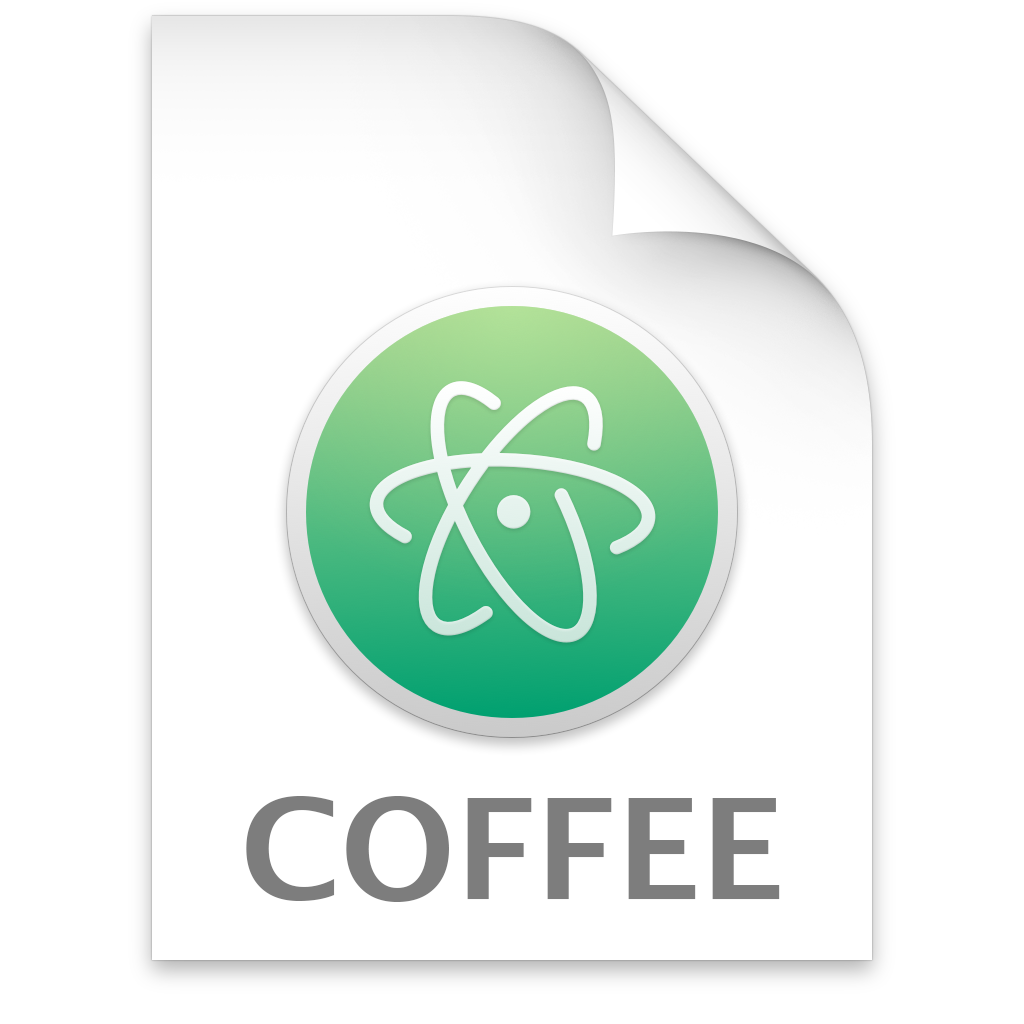
<style>
.page{position:relative;width:1024px;height:1024px;background:#ffffff}
.page>*{position:absolute;margin:0}
.t1{font:140px "LucidaGrande-Bold";color:#7d7d7d}
</style>
<div class="page">
<p class="t1" style="left:246px;top:796px;width:534px;height:106px">COFFEE</p>
</div>
